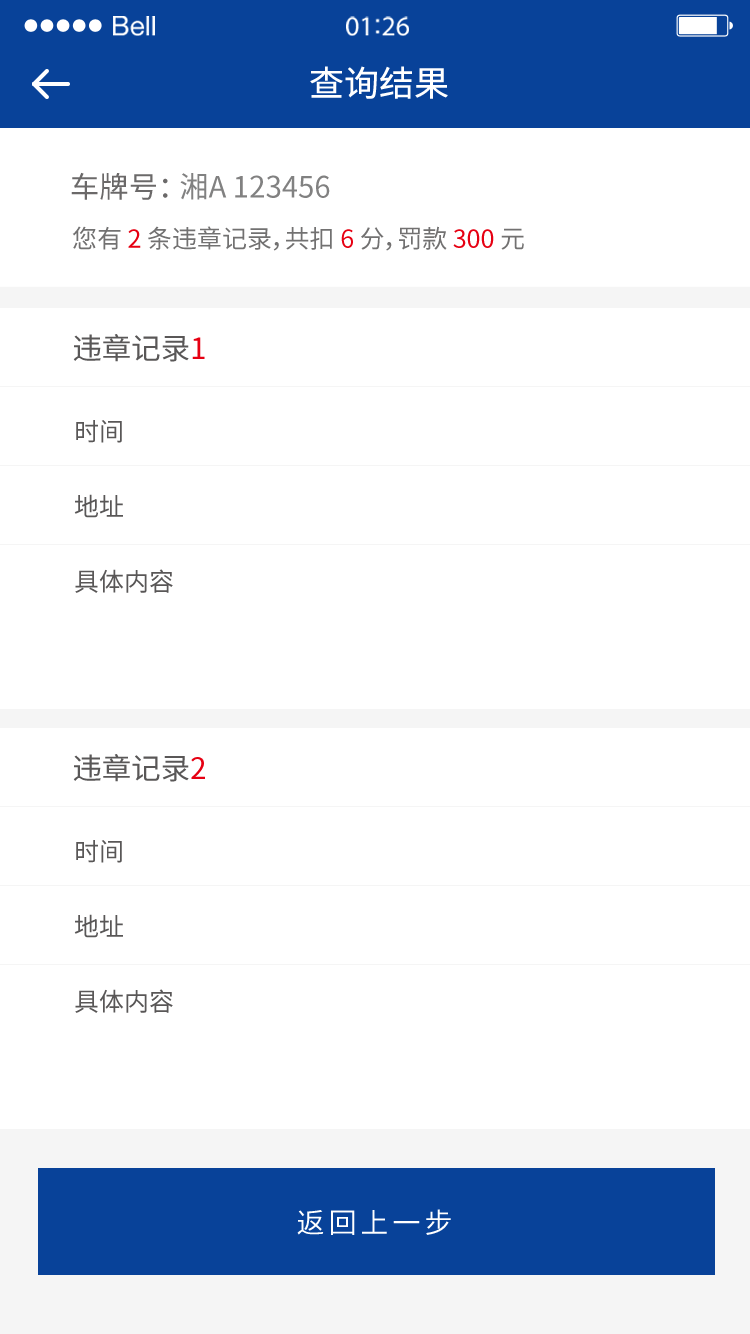
<style>
.page{position:relative;width:750px;height:1334px;background:#ffffff}
.page>*{position:absolute;margin:0}
.t1{font:35px "SourceHanSansCN-Regular";color:#ffffff}
.t2{font:29.3px "SourceHanSansCN-Regular";color:#727171}
.t3{font:29.3px "SourceHanSansCN-Regular";color:#595757}
.t4{font:25px "SourceHanSansCN-Regular";color:#727171}
.t5{font:25px "SourceHanSansCN-Regular";color:#e60012}
.t6{font:29.4px "SourceHanSansCN-Regular";color:#595757}
.t7{font:29.4px "SourceHanSansCN-Regular";color:#e60012}
.t8{font:25px/75px "SourceHanSansCN-Regular";color:#595757}
.t9{font:28.1px "SourceHanSansCN-Regular";letter-spacing:0.14em;color:#ffffff}
</style>
<div class="page">
<p class="t1" style="left:310px;top:66px;width:138px;height:33px">查询结果</p>
<p class="t2" style="left:71px;top:172px;width:259px;height:28px;opacity:0.89"><span class="t3">车牌号： </span>湘A 123456</p>
<p class="t4" style="left:72px;top:226px;width:452px;height:25px">您有 <span class="t5">2</span> 条违章记录，共扣 <span class="t5">6 </span>分，罚款 <span class="t5">300</span> 元</p>
<p class="t6" style="left:73px;top:334px;width:132px;height:28px">违章记录<span class="t7">1</span></p>
<p class="t8" style="left:74px;top:420px;width:99px;height:173px">时间<br>地址<br>具体内容</p>
<p class="t6" style="left:73px;top:754px;width:132px;height:28px">违章记录<span class="t7">2</span></p>
<p class="t8" style="left:74px;top:840px;width:99px;height:173px">时间<br>地址<br>具体内容</p>
<p class="t9" style="left:297px;top:1209px;width:154px;height:26px">返回上一步</p>
</div>
